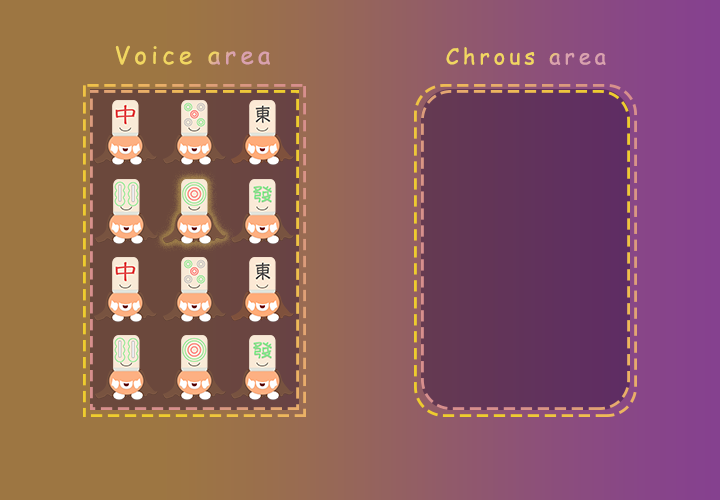
<style>
.page{position:relative;width:720px;height:500px}
.page>*{position:absolute;margin:0}
.t1{font:24px "ComicSansMS";letter-spacing:0.18em}
.t2{font:21.8px "ComicSansMS";letter-spacing:0.18em}
</style>
<div class="page">
<p class="t1" style="left:115px;top:45px;width:155px;height:20px">Voice area</p>
<p class="t2" style="left:446px;top:47px;width:160px;height:19px">Chrous area</p>
</div>
